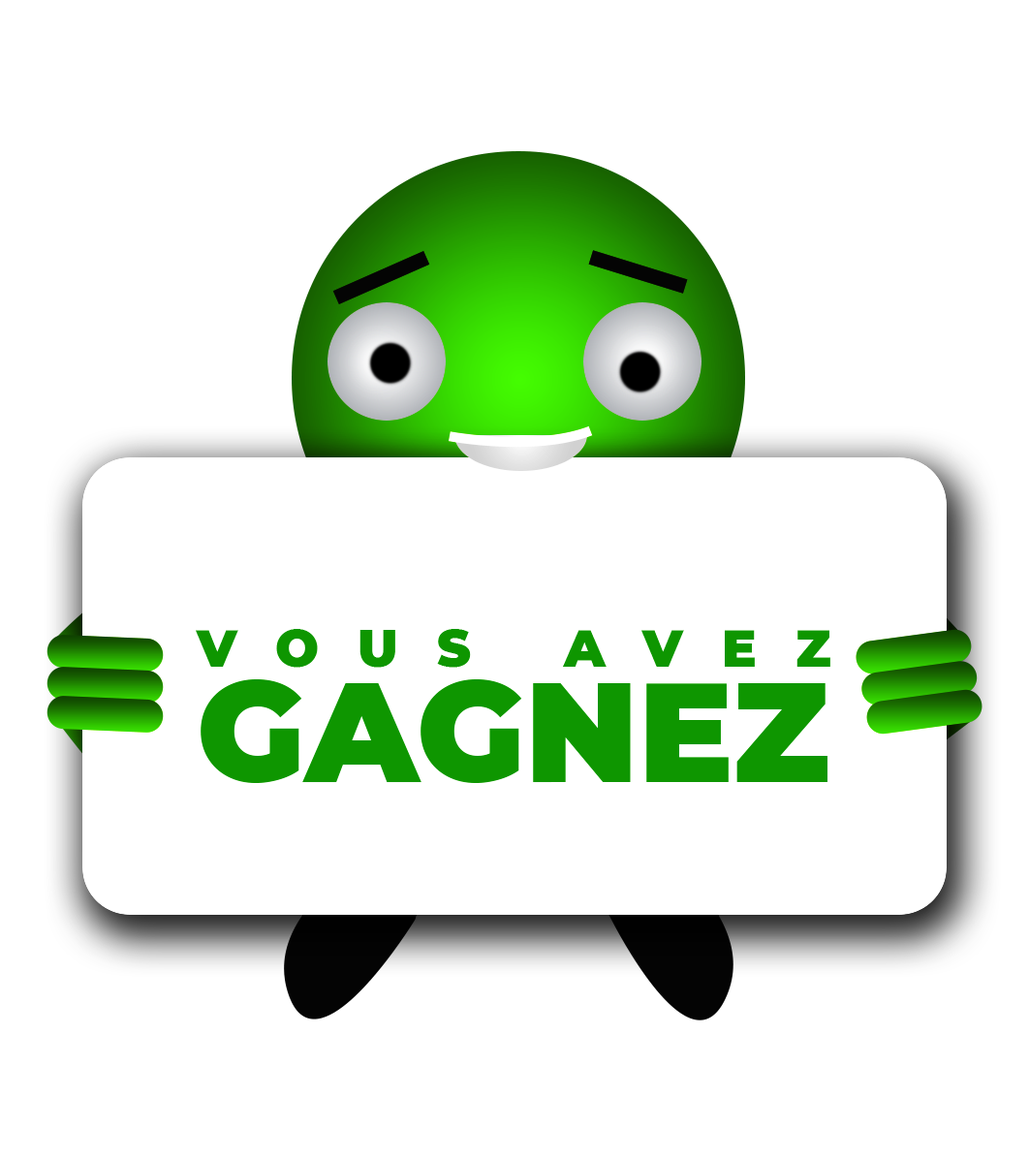
<style>
.page{position:relative;width:1029px;height:1159px;background:#ffffff}
.page>*{position:absolute;margin:0}
.t1{font:88.2px/166.2px "Montserrat-Black";letter-spacing:0.76em;color:#0e9600;text-transform:uppercase}
.t2{font:241.3px/166.2px "Montserrat-Black";color:#0e9600;text-transform:uppercase}
</style>
<div class="page">
<p class="t1" style="left:196px;top:629px;width:634px;height:154px">Vous avez<br><span class="t2">gagnez</span></p>
</div>
